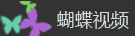
<style>
.page{position:relative;width:135px;height:36px;background:#333333}
.page>*{position:absolute;margin:0}
.t1{font:18px "MicrosoftYaHei";color:#d3dbd7}
</style>
<div class="page">
<p class="t1" style="left:56px;top:11px;width:73px;height:18px">蝴蝶视频</p>
</div>
